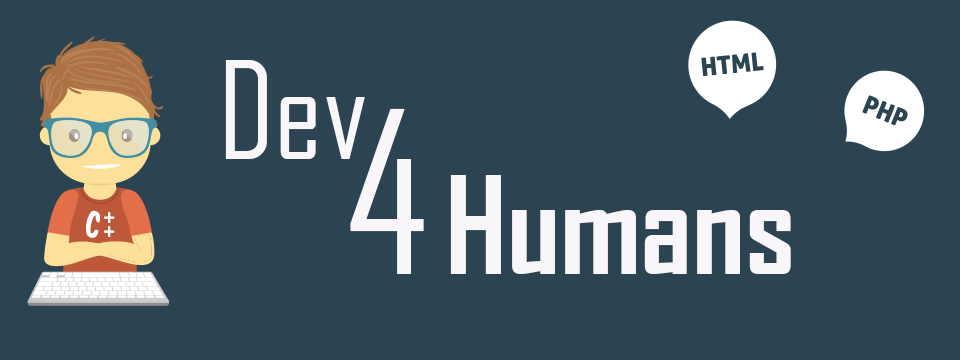
<style>
.page{position:relative;width:960px;height:360px;background:#2c4451}
.page>*{position:absolute;margin:0}
.t1{font:129.5px "AgencyFB-Reg";color:#f8f6f9}
.t2{font:215.9px "AgencyFB-Reg";color:#f8f6f9}
.t3{font:129.5px "AgencyFB-Bold";color:#f8f6f9}
</style>
<div class="page">
<p class="t1" style="left:225px;top:60px;width:140px;height:99px">Dev</p>
<p class="t2" style="left:350px;top:108px;width:74px;height:166px">4</p>
<p class="t3" style="left:450px;top:175px;width:341px;height:99px">Humans</p>
</div>
